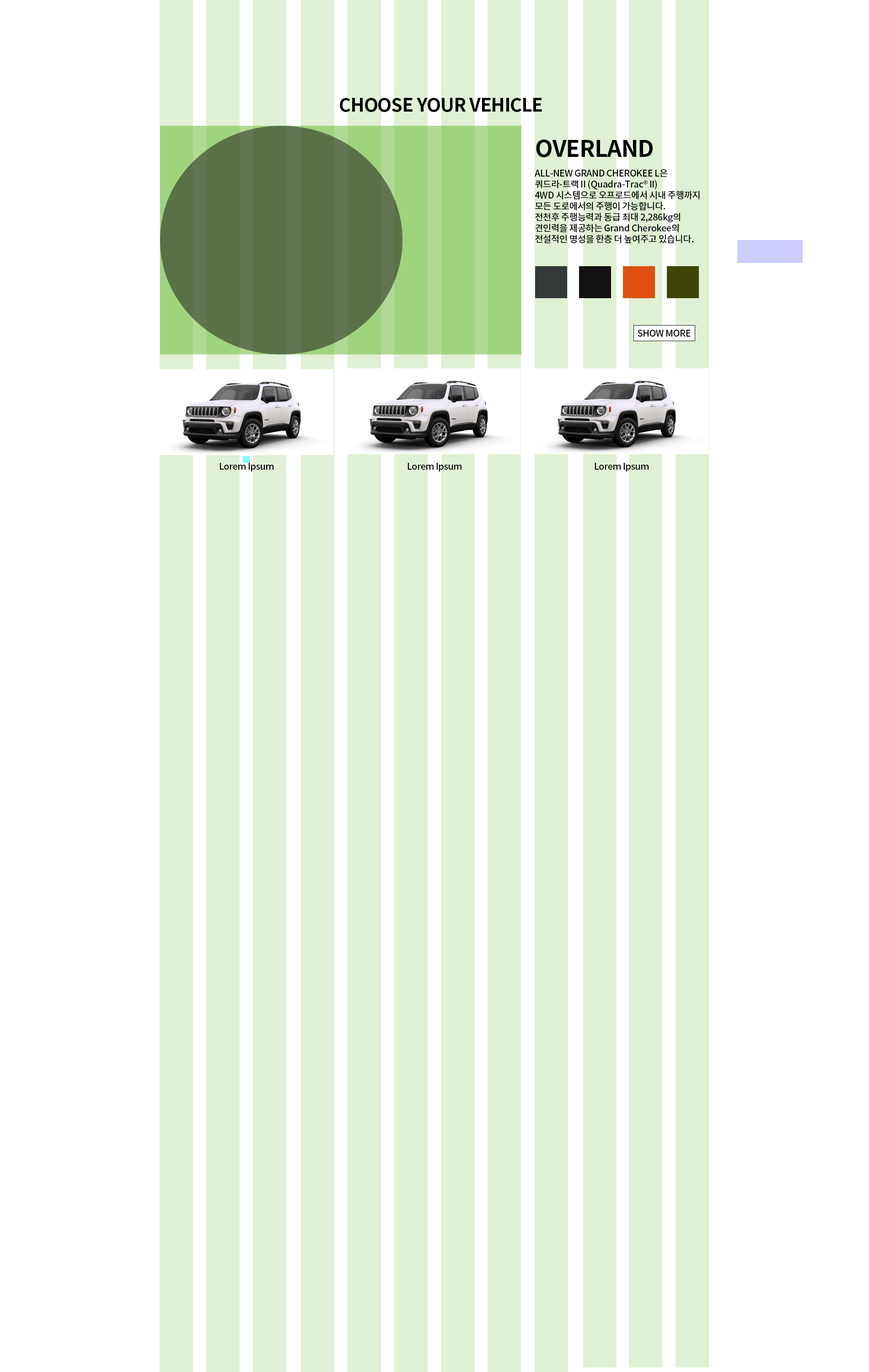
<style>
.page{position:relative;width:869px;height:1372px;background:#ffffff}
.page>*{position:absolute;margin:0}
.t1{font:18.3px "NotoSansKR-Bold";letter-spacing:-0.025em;color:#000000}
.t2{font:22.9px "NotoSansKR-Bold";letter-spacing:-0.025em;color:#000000}
.t3{font:9.1px "NotoSansKR-Medium";letter-spacing:-0.025em;color:#000000}
</style>
<div class="page">
<p class="t1" style="left:340px;top:98px;width:202px;height:14px">CHOOSE YOUR VEHICLE</p>
<p class="t2" style="left:536px;top:140px;width:117px;height:17px">OVERLAND</p>
<p class="t3" style="left:535px;top:169px;width:165px;height:74px">ALL-NEW GRAND CHEROKEE L은 <br>쿼드라-트랙 II (Quadra-Trac® II) <br>4WD 시스템으로 오프로드에서 시내 주행까지 <br>모든 도로에서의 주행이 가능합니다.<br>전천후 주행능력과 동급 최대 2,286kg의 <br>견인력을 제공하는 Grand Cherokee의 <br>전설적인 명성을 한층 더 높여주고 있습니다.</p>
<p class="t3" style="left:638px;top:330px;width:53px;height:7px">SHOW MORE</p>
<p class="t3" style="left:220px;top:463px;width:54px;height:9px">Lorem Ipsum</p>
<p class="t3" style="left:408px;top:463px;width:53px;height:9px">Lorem Ipsum</p>
<p class="t3" style="left:595px;top:463px;width:54px;height:9px">Lorem Ipsum</p>
</div>
